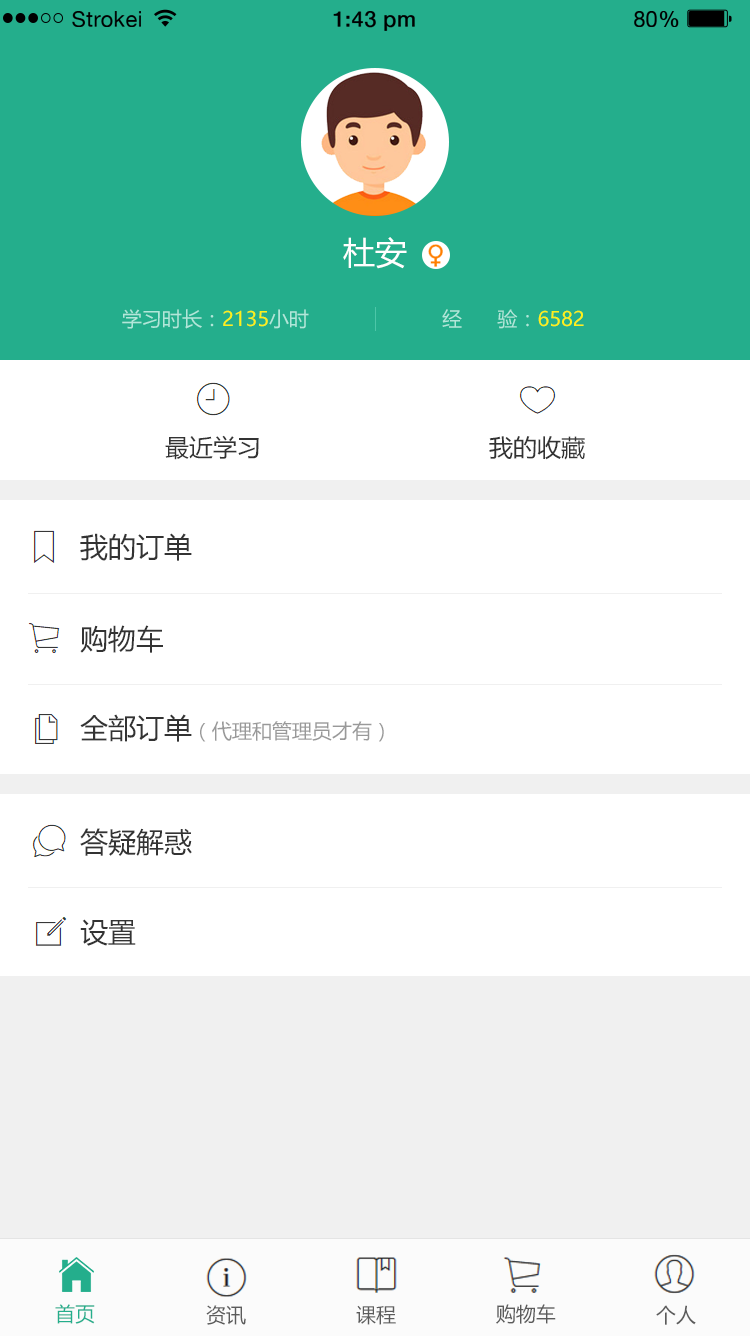
<style>
.page{position:relative;width:750px;height:1336px;background:#ffffff}
.page>*{position:absolute;margin:0}
.t1{font:21.8px "HelveticaNeue";letter-spacing:0.02em;color:#000000}
.t2{font:21.8px "HelveticaNeue-Medium";letter-spacing:0.02em;color:#000000}
.t3{font:32px "MicrosoftYaHei";color:#ffffff}
.t4{font:20px "MicrosoftYaHei";color:#b1e7da}
.t5{font:20px "MicrosoftYaHei";color:#fff116}
.t6{font:24px "MicrosoftYaHei";color:#333333}
.t7{font:28px "MicrosoftYaHei";color:#333333}
.t8{font:20px "MicrosoftYaHei";color:#999999}
.t9{font:20px "MicrosoftYaHei";color:#24ae8c}
.t10{font:20px "MicrosoftYaHei";color:#5b5b5b}
</style>
<div class="page">
<p class="t1" style="left:72px;top:11px;width:69px;height:16px">Strokei</p>
<p class="t2" style="left:333px;top:11px;width:82px;height:20px">1:43 pm</p>
<p class="t1" style="left:634px;top:11px;width:45px;height:16px">80<span class="t2">%</span></p>
<p class="t3" style="left:343px;top:237px;width:64px;height:32px">杜安</p>
<p class="t4" style="left:122px;top:309px;width:187px;height:20px">学习时长：<span class="t5">2135</span>小时</p>
<p class="t4" style="left:442px;top:309px;width:142px;height:20px">经      验：<span class="t5">6582</span></p>
<p class="t6" style="left:165px;top:435px;width:94px;height:25px">最近学习</p>
<p class="t6" style="left:489px;top:436px;width:96px;height:24px">我的收藏</p>
<p class="t7" style="left:80px;top:533px;width:112px;height:28px">我的订单</p>
<p class="t7" style="left:80px;top:625px;width:83px;height:28px">购物车</p>
<p class="t8" style="left:80px;top:714px;width:304px;height:28px"><span class="t7">全部订单</span>（代理和管理员才有）</p>
<p class="t7" style="left:80px;top:828px;width:112px;height:28px">答疑解惑</p>
<p class="t7" style="left:80px;top:919px;width:56px;height:27px">设置</p>
<p class="t9" style="left:55px;top:1304px;width:40px;height:20px">首页</p>
<p class="t10" style="left:206px;top:1305px;width:40px;height:20px">资讯</p>
<p class="t10" style="left:356px;top:1305px;width:40px;height:20px">课程</p>
<p class="t10" style="left:496px;top:1304px;width:60px;height:20px">购物车</p>
<p class="t10" style="left:656px;top:1305px;width:40px;height:20px">个人</p>
</div>
